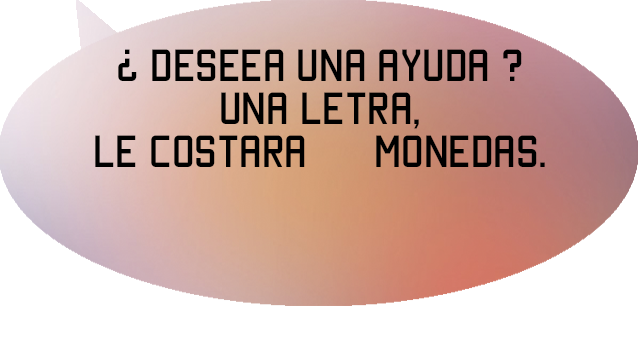
<style>
.page{position:relative;width:640px;height:360px;background:#ffffff}
.page>*{position:absolute;margin:0}
.t1{font:36px "Manteka";color:#000000}
</style>
<div class="page">
<p class="t1" style="left:118px;top:49px;width:404px;height:80px;text-align:center">¿ Deseea una ayuda ?<br>una letra,</p>
<p class="t1" style="left:95px;top:135px;width:450px;height:32px">Le costara      Monedas.</p>
</div>
